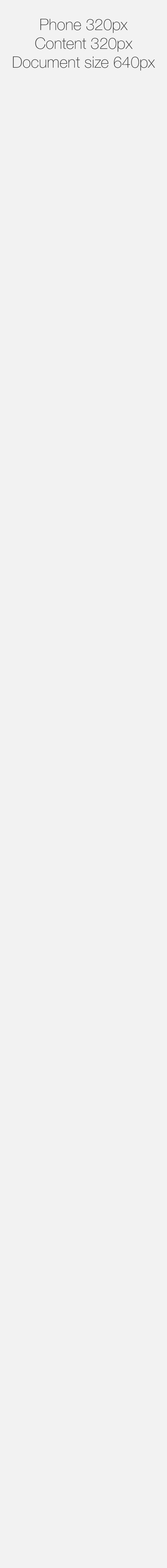
<style>
.page{position:relative;width:167px;height:1568px;background:#f2f2f2}
.page>*{position:absolute;margin:0}
.t1{font:15.7px "HelveticaNeue-Thin";color:#373737}
</style>
<div class="page">
<p class="t1" style="left:13px;top:19px;width:142px;height:52px;text-align:center">Phone 320px<br>Content 320px<br>Document size 640px</p>
</div>
